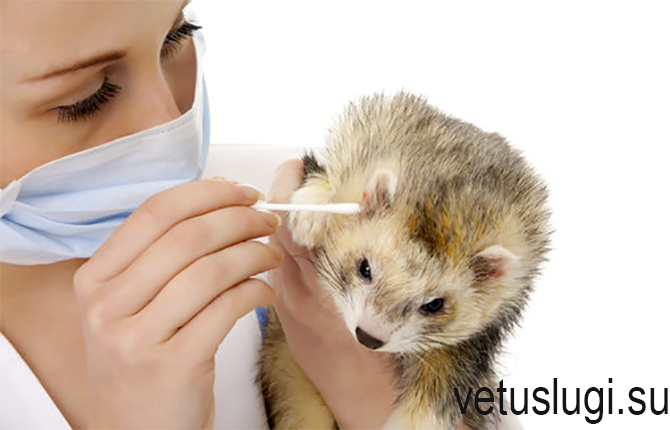
<style>
.page{position:relative;width:670px;height:430px;background:#ffffff}
.page>*{position:absolute;margin:0}
.t1{font:50px "ArialNarrow";letter-spacing:0.002em;color:#121314}
</style>
<div class="page">
<p class="t1" style="left:453px;top:378px;width:215px;height:46px">vetuslugi.su</p>
</div>
